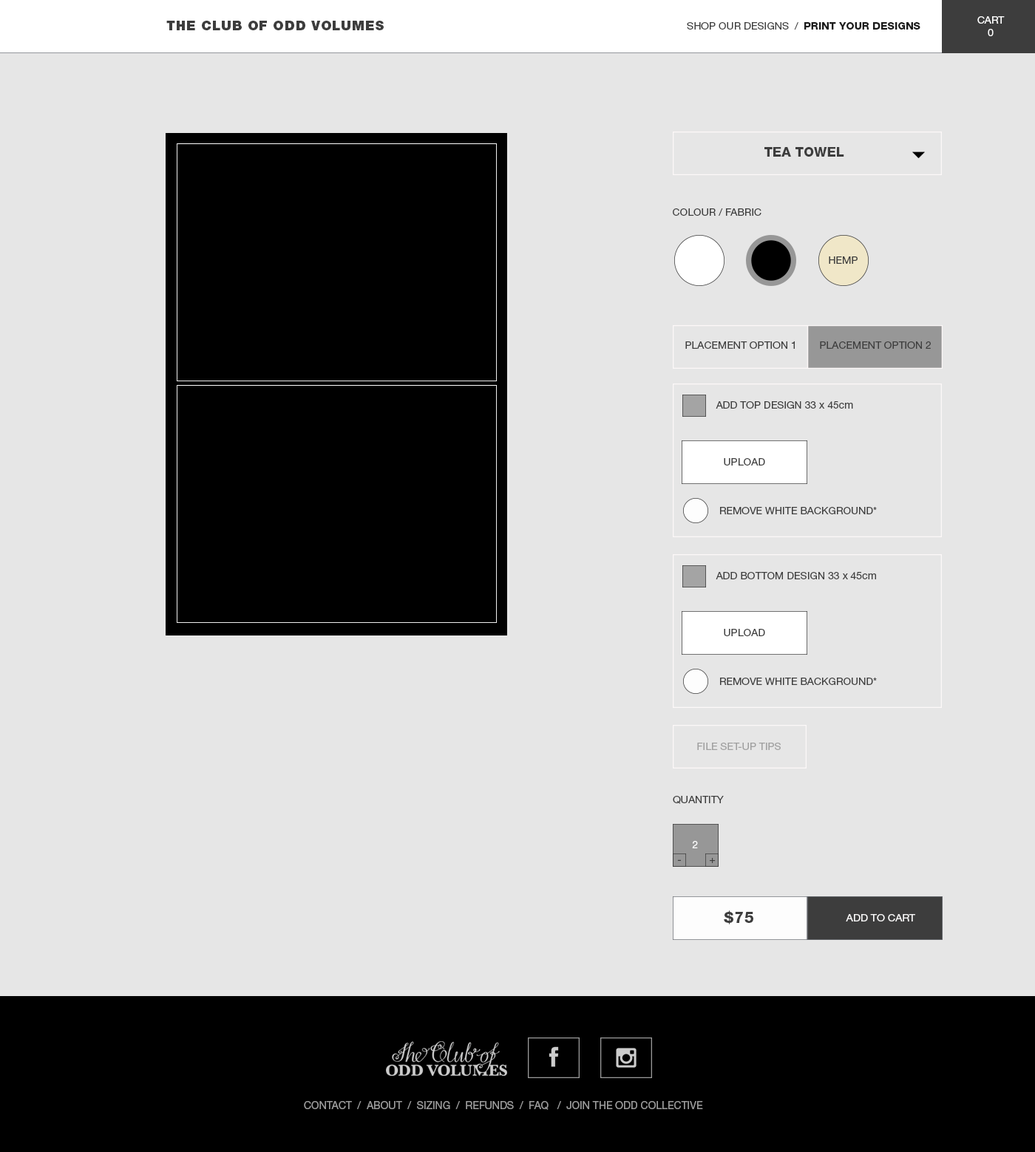
<style>
.page{position:relative;width:1035px;height:1152px;background:#e6e6e6}
.page>*{position:absolute;margin:0}
.t1{font:10.3px "HelveticaNeueLTStd-Roman";color:#ffffff}
.t2{font:13.3px "HelveticaNeueLTStd-Blk";letter-spacing:0.05em;color:#3d3d3d}
.t3{font:10.3px "HelveticaNeueLTStd-Roman";color:#3d3d3d}
.t4{font:10.3px "HelveticaNeueLTStd-Hv";color:#1b1b1b}
.t5{font:13.3px "HelveticaNeueLTStd-Hv";color:#3d3d3d}
.t6{font:10.3px "HelveticaNeueLTStd-Roman";color:#3e3e3e}
.t7{font:10.3px "HelveticaNeueLTStd-Roman";color:#a0a0a0}
.t8{font:10.1px "HelveticaNeueLTStd-Roman";color:#ffffff}
.t9{font:10.1px "HelveticaNeueLTStd-Roman";color:#3e3e3e}
.t10{font:14.8px "HelveticaNeueLTStd-Hv";letter-spacing:0.05em;color:#3d3d3d}
.t11{font:10.3px "HelveticaNeueLTStd-Roman";color:#faf9f9}
.t12{font:10.6px "HelveticaNeueLTStd-Roman";color:#9b9b9b}
</style>
<div class="page">
<p class="t1" style="left:977px;top:16px;width:27px;height:20px;text-align:center">CART<br>0</p>
<p class="t2" style="left:166px;top:21px;width:218px;height:9px">THE CLUB OF ODD VOLUMES</p>
<p class="t3" style="left:687px;top:22px;width:233px;height:8px">SHOP OUR DESIGNS  /  <span class="t4">PRINT YOUR DESIGNS</span></p>
<p class="t5" style="left:764px;top:147px;width:80px;height:10px">TEA TOWEL</p>
<p class="t6" style="left:673px;top:208px;width:88px;height:8px">COLOUR / FABRIC</p>
<p class="t6" style="left:829px;top:256px;width:28px;height:8px">HEMP</p>
<p class="t6" style="left:685px;top:341px;width:110px;height:8px">PLACEMENT OPTION 1</p>
<p class="t6" style="left:820px;top:341px;width:111px;height:8px">PLACEMENT OPTION 2</p>
<p class="t6" style="left:715px;top:401px;width:138px;height:8px">ADD TOP DESIGN 33 x 45cm</p>
<p class="t6" style="left:724px;top:458px;width:41px;height:8px">UPLOAD</p>
<p class="t6" style="left:720px;top:507px;width:157px;height:7px">REMOVE WHITE BACKGROUND*</p>
<p class="t6" style="left:715px;top:572px;width:161px;height:7px">ADD BOTTOM DESIGN 33 x 45cm</p>
<p class="t6" style="left:724px;top:629px;width:41px;height:7px">UPLOAD</p>
<p class="t6" style="left:720px;top:678px;width:157px;height:7px">REMOVE WHITE BACKGROUND*</p>
<p class="t7" style="left:697px;top:743px;width:84px;height:7px">FILE SET-UP TIPS</p>
<p class="t6" style="left:673px;top:796px;width:51px;height:8px">QUANTITY</p>
<p class="t8" style="left:692px;top:841px;width:6px;height:8px">2</p>
<p class="t9" style="left:677px;top:860px;width:4px;height:1px">-</p>
<p class="t9" style="left:710px;top:858px;width:5px;height:5px">+</p>
<p class="t10" style="left:724px;top:911px;width:29px;height:14px">$75</p>
<p class="t11" style="left:846px;top:914px;width:69px;height:8px">ADD TO CART</p>
<p class="t12" style="left:304px;top:1101px;width:399px;height:9px">CONTACT  /  ABOUT  /  SIZING  /  REFUNDS  /  FAQ   /  JOIN THE ODD COLLECTIVE</p>
</div>
